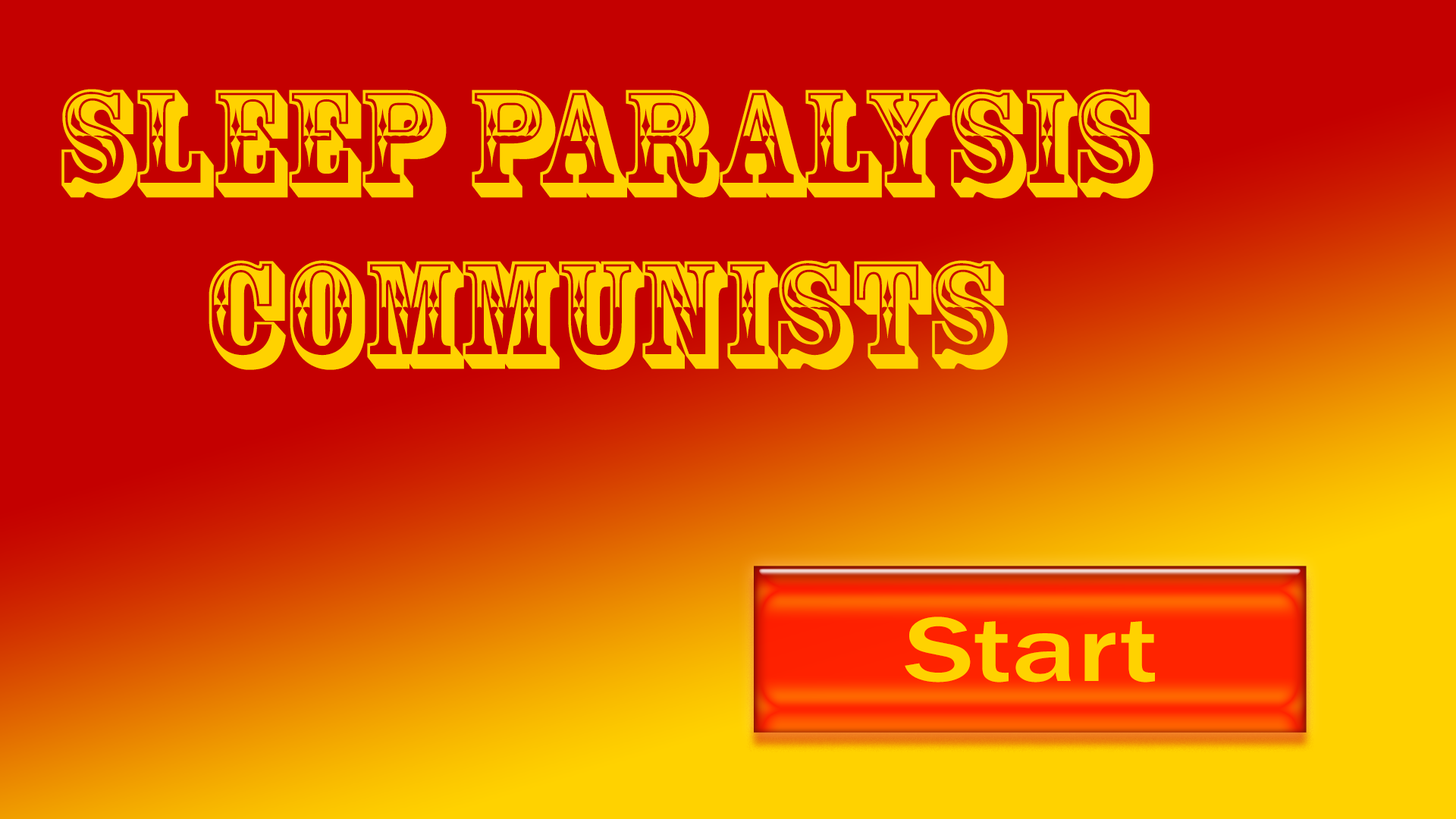
<style>
.page{position:relative;width:1456px;height:819px;background:#c40000}
.page>*{position:absolute;margin:0}
.t1{font:142.8px "RosewoodStd-Regular";color:#ffd200}
.t2{font:94.6px "FranklinGothic-Medium";color:#ffd200;scale:1.28 1}
</style>
<div class="page">
<p class="t1" style="left:61px;top:89px;width:1092px;height:281px;text-align:center">Sleep Paralysis<br>Communists</p>
<p class="t2" style="left:905px;top:617px;width:250px;height:65px">Start</p>
</div>
